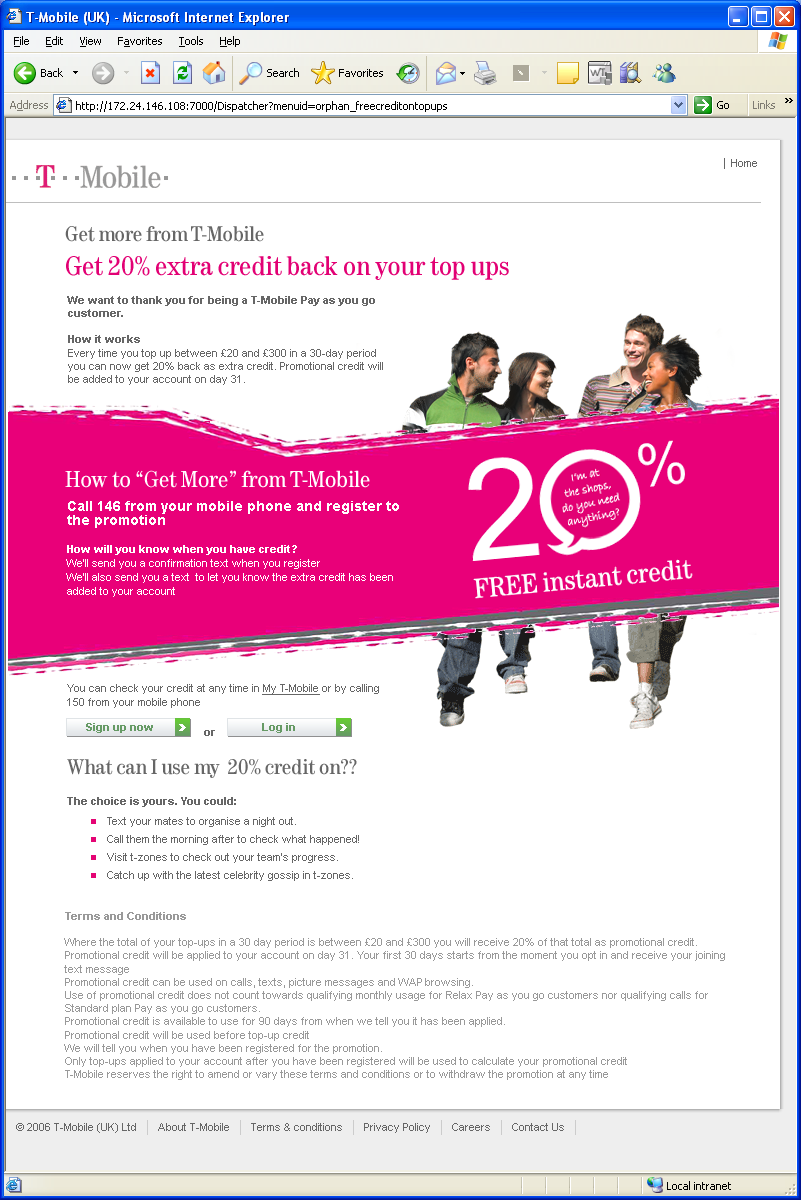
<style>
.page{position:relative;width:801px;height:1200px;background:#ffffff}
.page>*{position:absolute;margin:0}
.t1{font:28px "Tele-Antiqua";color:#e20074}
.t2{font:22px "Tele-Antiqua";color:#666666}
.t3{font:11px "ArialMT";color:#666666}
.t4{font:11px "Arial-BoldMT";color:#666666}
.t5{font:24px "Tele-Antiqua";color:#ffffff}
.t6{font:11px/14px "ArialMT";color:#ffffff}
.t7{font:14px/14px "Arial-BoldMT";color:#ffffff}
.t8{font:11px/14px "Arial-BoldMT";color:#ffffff}
.t9{font:11px/14px "ArialMT";color:#666666}
.t10{font:11px/14px "ArialMT";color:#666666;text-decoration:underline}
.t11{font:11px/18px "ArialMT";color:#666666}
.t12{font:11px "ArialMT";color:#999999}
.t13{font:11px "Arial-BoldMT";color:#999999}
</style>
<div class="page">
<p class="t1" style="left:65px;top:226px;width:444px;height:54px"><span class="t2">Get more from T-Mobile<br></span>Get 20% extra credit back on your top ups</p>
<p class="t3" style="left:67px;top:296px;width:316px;height:89px"><span class="t4">We want to thank you for being a T-Mobile Pay as you go customer. <br><br>How it works<br></span>Every time you top up between £20 and £300 in a 30-day period you can now get 20% back as extra credit. Promotional credit will be added to your account on day 31.</p>
<p class="t5" style="left:65px;top:470px;width:305px;height:18px">How to “Get More” from T-Mobile</p>
<p class="t6" style="left:66px;top:501px;width:333px;height:96px"><span class="t7">Call 146 from your mobile phone and register to the promotion<br></span><span class="t8"><br>How will you know when you have credit?<br></span>We’ll send you a confirmation text when you register  <br>We’ll also send you a text  to let you know the extra credit has been added to your account</p>
<p class="t9" style="left:67px;top:684px;width:312px;height:24px">You can check your credit at any time in <span class="t10">My T-Mobile</span> or by calling 150 from your mobile phone</p>
<p class="t4" style="left:204px;top:730px;width:11px;height:6px">or</p>
<p class="t2" style="left:67px;top:759px;width:290px;height:19px">What can I use my  20% credit on?</p>
<p class="t4" style="left:67px;top:797px;width:169px;height:10px">The choice is yours. You could:</p>
<p class="t11" style="left:107px;top:817px;width:252px;height:64px"><span class="t3">T</span>ext your mates to organise a night out.<br>Call them the morning after to check what happened!<br>Visit t-zones to check out your team’s progress.<br>Catch up with the latest celebrity gossip in t-zones.</p>
<p class="t12" style="left:64px;top:912px;width:661px;height:168px"><span class="t13">Terms and Conditions<br><br></span>Where the total of your top-ups in a 30 day period is between £20 and £300 you will receive 20% of that total as promotional credit. <br>Promotional credit will be applied to your account on day 31. Your first 30 days starts from the moment you opt in and receive your joining text message<br>Promotional credit can be used on calls, texts, picture messages and WAP browsing. <br>Use of promotional credit does not count towards qualifying monthly usage for Relax Pay as you go customers nor qualifying calls for Standard plan Pay as you go customers. <br>Promotional credit is available to use for 90 days from when we tell you it has been applied. <br>Promotional credit will be used before top-up credit <br>We will tell you when you have been registered for the promotion. <br>Only top-ups applied to your account after you have been registered will be used to calculate your promotional credit<br>T-Mobile reserves the right to amend or vary these terms and conditions or to withdraw the promotion at any time</p>
</div>
